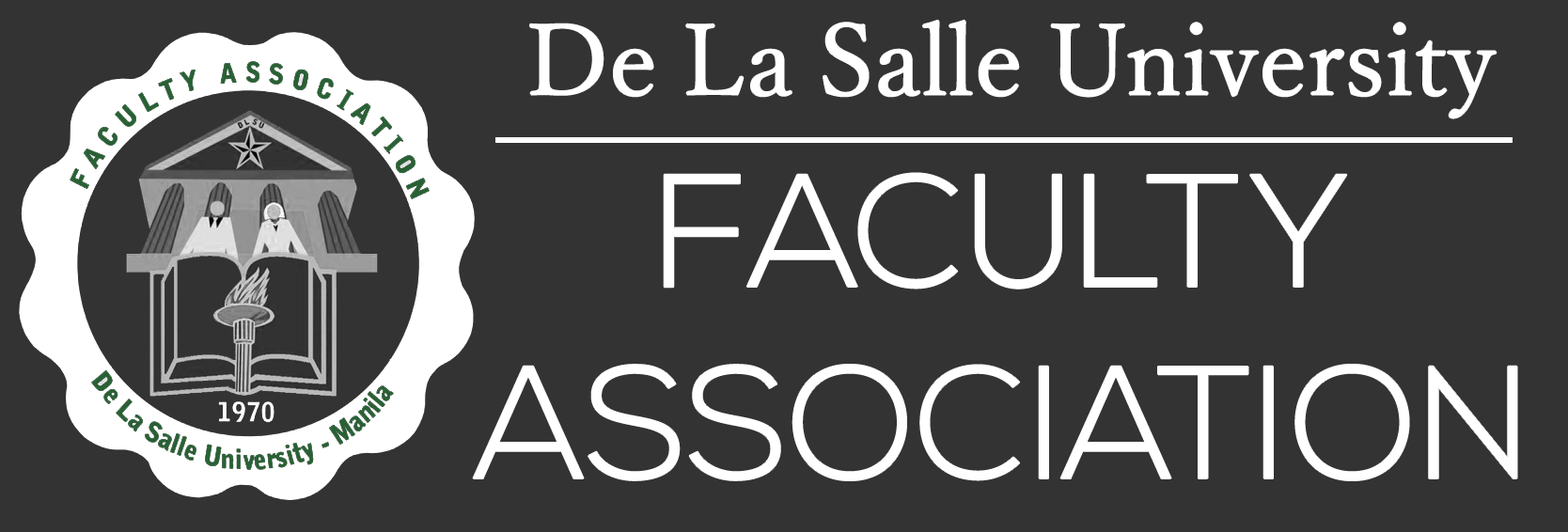
<style>
.page{position:relative;width:1568px;height:532px;background:#333333}
.page>*{position:absolute;margin:0}
.t1{font:98.7px "YuMincho-Regular";color:#ffffff}
.t2{font:159.8px "NexaLight";color:#ffffff}
</style>
<div class="page">
<p class="t1" style="left:529px;top:20px;width:968px;height:98px">De La Salle University</p>
<p class="t2" style="left:473px;top:173px;width:1044px;height:307px;text-align:center">FACULTY ASSOCIATION</p>
</div>
